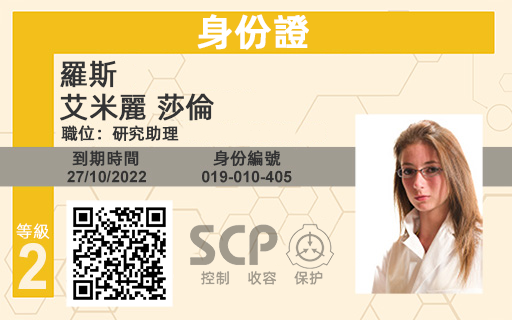
<style>
.page{position:relative;width:512px;height:320px;background:#fef2dc}
.page>*{position:absolute;margin:0}
.t1{font:37.5px "AlibabaPuHuiTiM";color:#ffffff;font-weight:bold}
.t2{font:29.2px "AlibabaPuHuiTiR";color:#333334;font-weight:bold}
.t3{font:16.7px "AlibabaPuHuiTiR";color:#333334;font-weight:bold}
.t4{font:16.7px "AlibabaPuHuiTiL";color:#ffffff;font-weight:bold}
</style>
<div class="page">
<p class="t1" style="left:197px;top:14px;width:112px;height:36px">身份證</p>
<p class="t2" style="left:60px;top:60px;width:57px;height:28px">羅斯</p>
<p class="t2" style="left:60px;top:93px;width:154px;height:28px">艾米麗 莎倫</p>
<p class="t3" style="left:61px;top:125px;width:118px;height:17px">職位：研究助理</p>
<p class="t3" style="left:72px;top:150px;width:67px;height:17px">到期時間</p>
<p class="t3" style="left:213px;top:150px;width:68px;height:17px">身份編號</p>
<p class="t4" style="left:16px;top:223px;width:34px;height:16px">等級</p>
</div>
